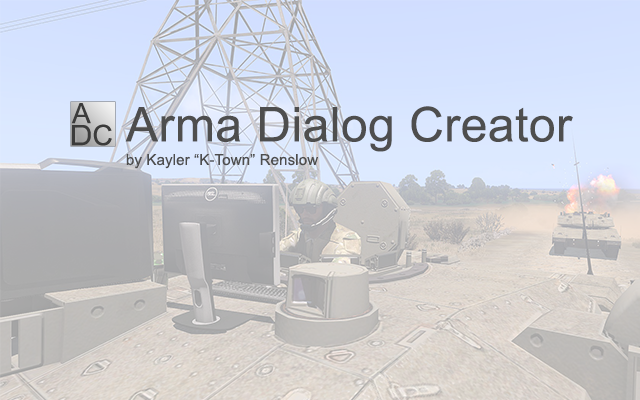
<style>
.page{position:relative;width:640px;height:400px}
.page>*{position:absolute;margin:0}
.t1{font:48px "ArialMT";letter-spacing:0.01em;color:#4e4e4e}
.t2{font:15px "ArialMT";letter-spacing:0.01em;color:#4e4e4e}
</style>
<div class="page">
<p class="t1" style="left:125px;top:106px;width:448px;height:46px">Arma Dialog Creator</p>
<p class="t2" style="left:126px;top:154px;width:192px;height:15px">by Kayler “K-Town” Renslow</p>
</div>
